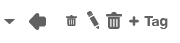
<style>
.page{position:relative;width:180px;height:43px;background:#ffffff}
.page>*{position:absolute;margin:0}
.t1{font:14px "HelveticaNeue-Bold";color:#616161}
</style>
<div class="page">
<p class="t1" style="left:144px;top:16px;width:24px;height:13px">Tag</p>
</div>
